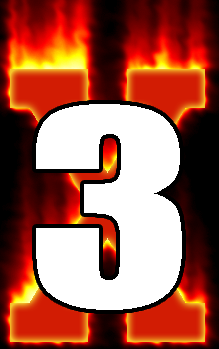
<style>
.page{position:relative;width:219px;height:349px;background:#ffffff}
.page>*{position:absolute;margin:0}
.t1{font:250px "Impact";letter-spacing:0.025em;color:#ffffff;font-variant:small-caps;scale:1.25 1}
</style>
<div class="page">
<p class="t1" style="left:36px;top:104px;width:146px;height:206px">3</p>
</div>
